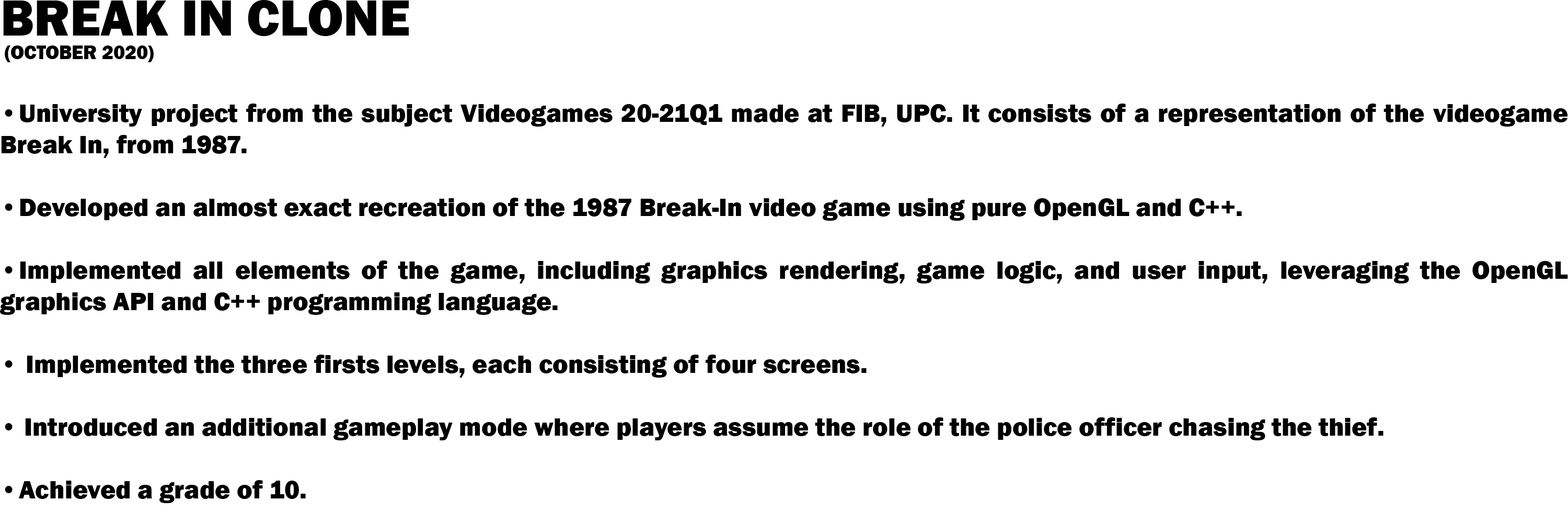
<style>
.page{position:relative;width:1568px;height:523px;background:#ffffff}
.page>*{position:absolute;margin:0}
.t1{font:26.1px "FranklinGothic-Heavy";color:#000000}
.t2{font:52.3px "FranklinGothic-Heavy";color:#000000}
.t3{font:19.6px "FranklinGothic-Heavy";color:#000000}
</style>
<div class="page">
<p class="t1" style="left:0px;top:0px;width:1568px;height:503px"><span class="t2">BREAK IN CLONE<br></span><span class="t3"> (OCTOBER 2020)<br></span><br>• University project from the subject Videogames 20-21Q1 made at FIB, UPC. It consists of a representation of the videogame Break In, from 1987. <br><br>• Developed an almost exact recreation of the 1987 Break-In video game using pure OpenGL and C++.<br><br>• Implemented all elements of the game, including graphics rendering, game logic, and user input, leveraging the OpenGL graphics API and C++ programming language.<br><br>•  Implemented the three firsts levels, each consisting of four screens. <br><br>• Introduced an additional gameplay mode where players assume the role of the police officer chasing the thief.<br><br>• Achieved a grade of 10.</p>
</div>
